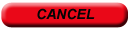
<style>
.page{position:relative;width:130px;height:30px;background:#ea0818}
.page>*{position:absolute;margin:0}
.t1{font:14px "Arial-BoldItalicMT";color:#040404}
</style>
<div class="page">
<p class="t1" style="left:37px;top:8px;width:58px;height:12px">CANCEL</p>
</div>
